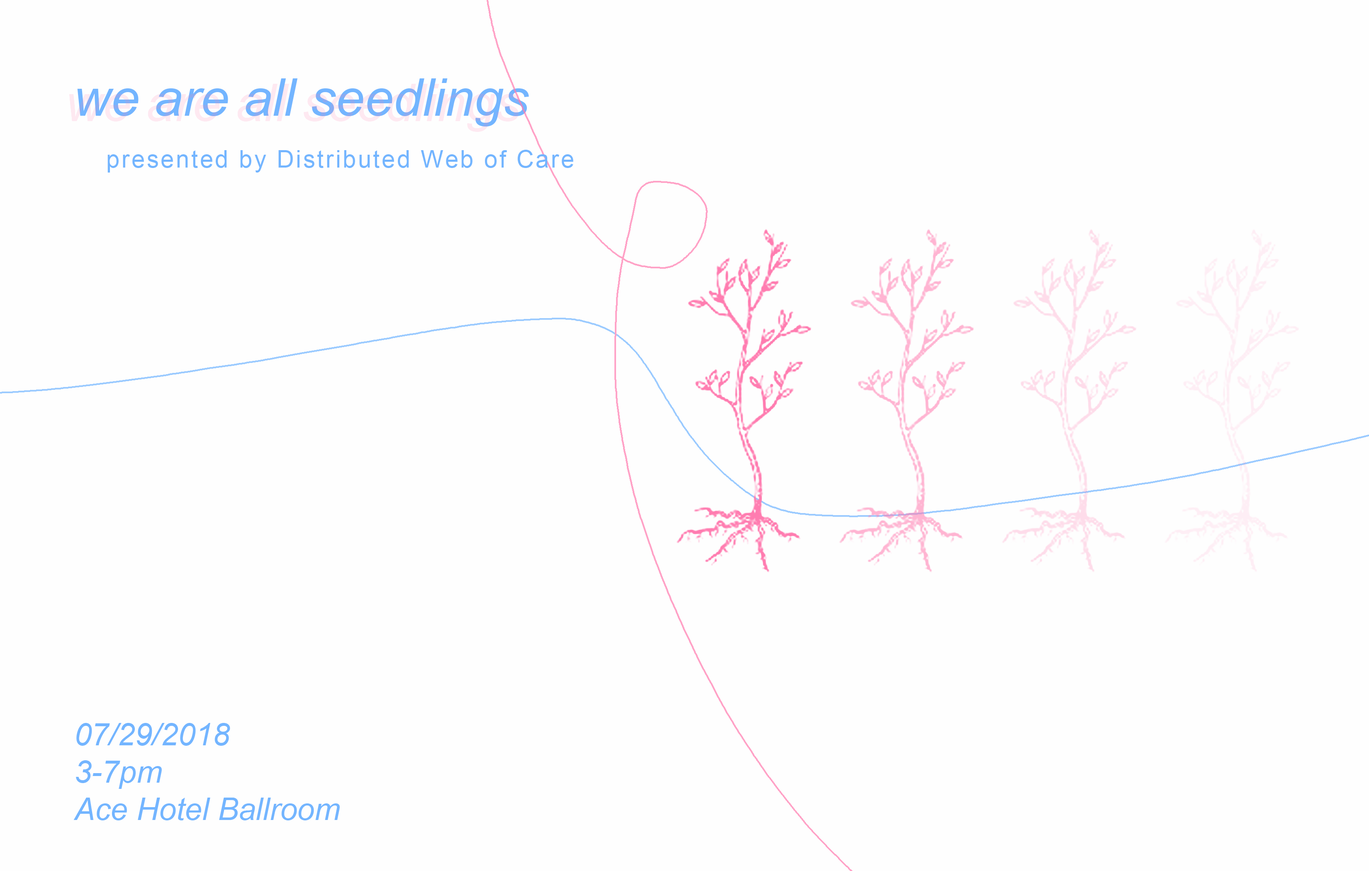
<style>
.page{position:relative;width:1369px;height:871px;background:#fefefe}
.page>*{position:absolute;margin:0}
.t1{font:51.9px "Arial-ItalicMT";color:#73b5ff}
.t2{font:24.2px "ArialMT";letter-spacing:0.075em;color:#73b5ff}
.t3{font:31.1px "Arial-ItalicMT";color:#73b5ff}
</style>
<div class="page">
<p class="t1" style="left:77px;top:78px;width:452px;height:49px">we are all seedlings</p>
<p class="t2" style="left:107px;top:150px;width:466px;height:23px">presented by Distributed Web of Care</p>
<p class="t3" style="left:73px;top:723px;width:267px;height:97px">07/29/2018<br>3-7pm<br>Ace Hotel Ballroom</p>
</div>
